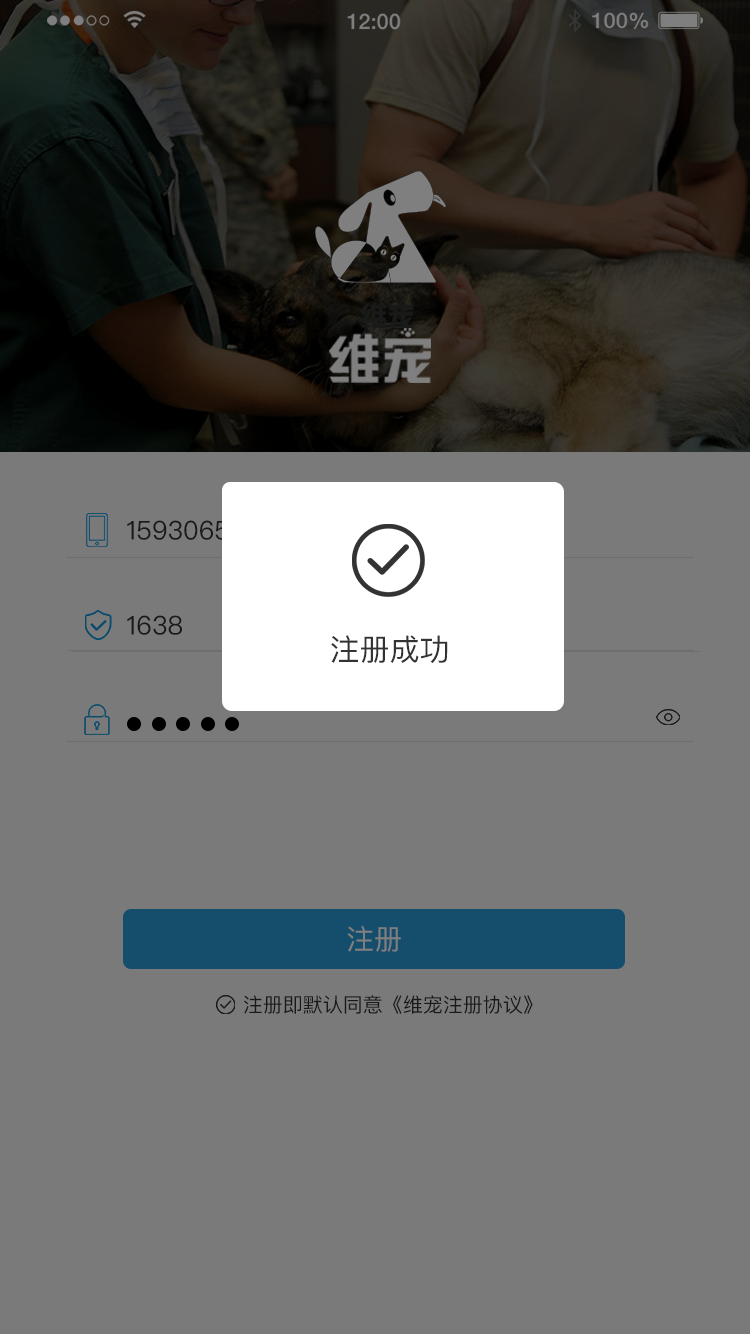
<style>
.page{position:relative;width:750px;height:1334px;background:#7a7a7a}
.page>*{position:absolute;margin:0}
.t1{font:26px "PingFangSC-Regular";color:#191919}
.t2{font:30px "PingFangSC-Regular";color:#333333}
.t3{font:28px "PingFangSC-Regular";color:#7f7f7f}
.t4{font:20px "PingFangSC-Regular";color:#191919}
</style>
<div class="page">
<p class="t1" style="left:127px;top:615px;width:55px;height:20px">1638</p>
<p class="t2" style="left:331px;top:635px;width:117px;height:28px">注册成功</p>
<p class="t3" style="left:347px;top:926px;width:54px;height:26px">注册</p>
<p class="t4" style="left:243px;top:995px;width:290px;height:19px">注册即默认同意《维宠注册协议》</p>
</div>
